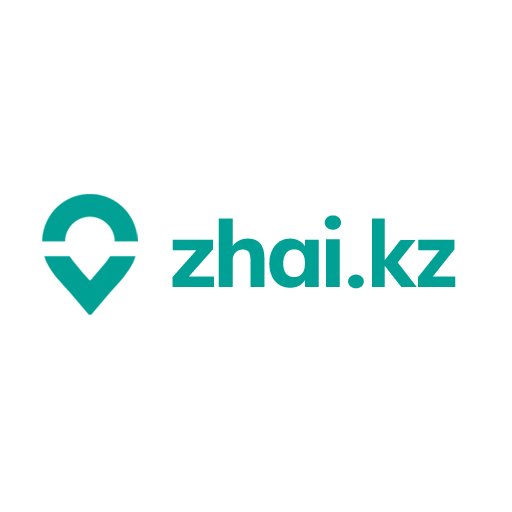
<style>
.page{position:relative;width:512px;height:512px;background:#ffffff}
.page>*{position:absolute;margin:0}
.t1{font:93.1px "Mulish-ExtraBold";letter-spacing:-0.025em;color:#00a194}
.t2{font:93.1px "Mulish-ExtraBold";letter-spacing:-0.05em;color:#00a194}
.t3{font:93.1px "Spartan-SemiBold";letter-spacing:-0.075em;color:#00a194;scale:1.15 1}
.t4{font:83.3px "Spartan-SemiBold";letter-spacing:-0.05em;color:#00a194;scale:1.15 1}
.t5{font:93.1px "Mulish-ExtraBold";letter-spacing:-0.025em;color:#00a194;scale:0.9 1}
.t6{font:93.1px "Mulish-ExtraBold";letter-spacing:-0.05em;color:#00a194;scale:0.9 1}
</style>
<div class="page">
<p class="t1" style="left:172px;top:215px;width:284px;height:74px">zh<span class="t2">a</span><span class="t3">i</span><span class="t4">.</span><span class="t5">k</span><span class="t6">z</span></p>
</div>
